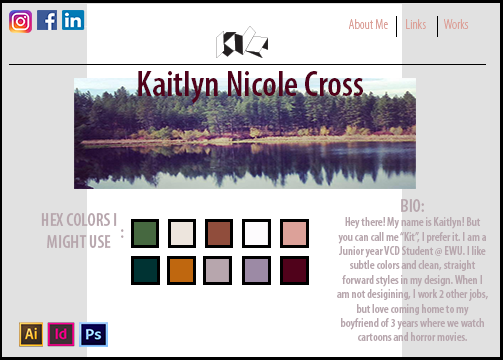
<style>
.page{position:relative;width:504px;height:360px;background:#ffffff}
.page>*{position:absolute;margin:0}
.t1{font:14px "MyriadPro-LightCond";color:#dca199}
.t2{font:36px "MyriadPro-SemiboldCond";color:#50021b}
.t3{font:12px "MyriadPro-SemiboldCond";color:#b7a6ad}
.t4{font:18px "MyriadPro-SemiboldCond";color:#b7a6ad}
</style>
<div class="page">
<p class="t1" style="left:349px;top:19px;width:39px;height:10px">About Me</p>
<p class="t1" style="left:406px;top:19px;width:20px;height:10px">Links</p>
<p class="t1" style="left:444px;top:19px;width:25px;height:10px">Works</p>
<p class="t2" style="left:138px;top:71px;width:225px;height:33px">Kaitlyn Nicole Cross</p>
<p class="t3" style="left:337px;top:199px;width:151px;height:142px;text-align:center"><span class="t4">BIO:<br></span>Hey there! My name is Kaitlyn! But you can call me “Kit”, I prefer it. I am a Junior year VCD Student @ EWU. I like subtle colors and clean, straight forward styles in my design. When I am not desigining, I work 2 other jobs, but love coming home to my boyfriend of 3 years where we watch cartoons and horror movies.</p>
<p class="t4" style="left:41px;top:213px;width:76px;height:35px;text-align:center">HEX COLORS I MIGHT USE</p>
<p class="t4" style="left:121px;top:229px;width:3px;height:9px">:</p>
</div>
